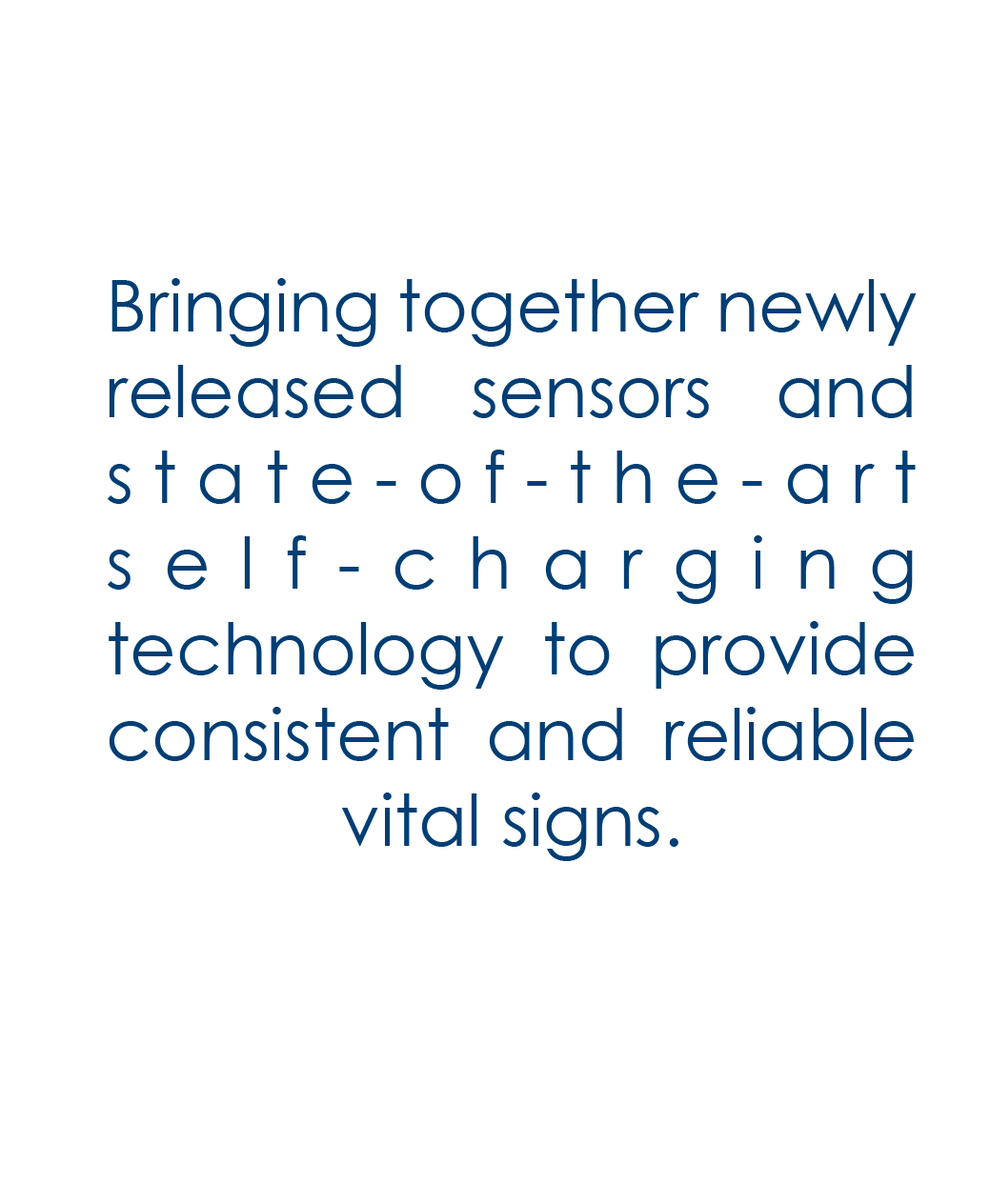
<style>
.page{position:relative;width:990px;height:1204px;background:#ffffff}
.page>*{position:absolute;margin:0}
.t1{font:71.5px "CenturyGothic";color:#003e74}
</style>
<div class="page">
<p class="t1" style="left:108px;top:278px;width:809px;height:583px;text-align:justify">Bringing together newly released sensors and state-of-the-art self-charging technology to provide consistent and reliable vital signs.</p>
</div>
